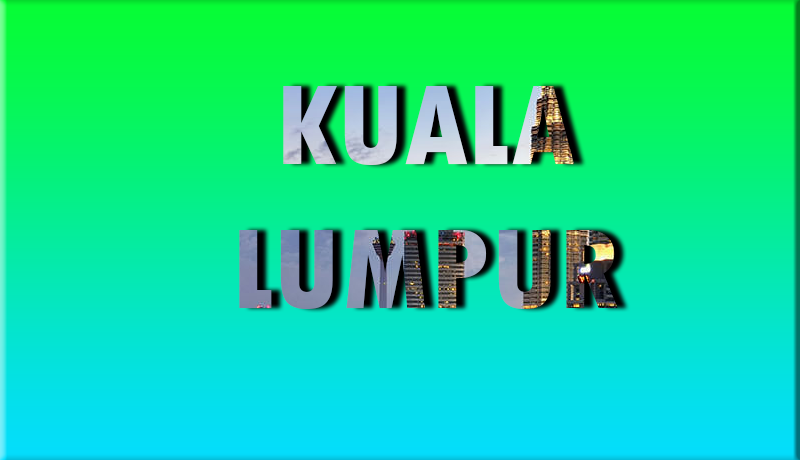
<style>
.page{position:relative;width:800px;height:460px}
.page>*{position:absolute;margin:0}
.t1{font:120px "TwCenMT-CondensedExtraBold"}
</style>
<div class="page">
<p class="t1" style="left:239px;top:86px;width:379px;height:223px;text-align:center">KUALA<br>LUMPUR</p>
</div>
